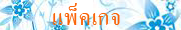
<style>
.page{position:relative;width:181px;height:30px}
.page>*{position:absolute;margin:0}
.t1{font:30px "AngsanaUPC";letter-spacing:0.025em;color:#f96308}
</style>
<div class="page">
<p class="t1" style="left:52px;top:3px;width:68px;height:22px">แพ็คเกจ</p>
</div>
